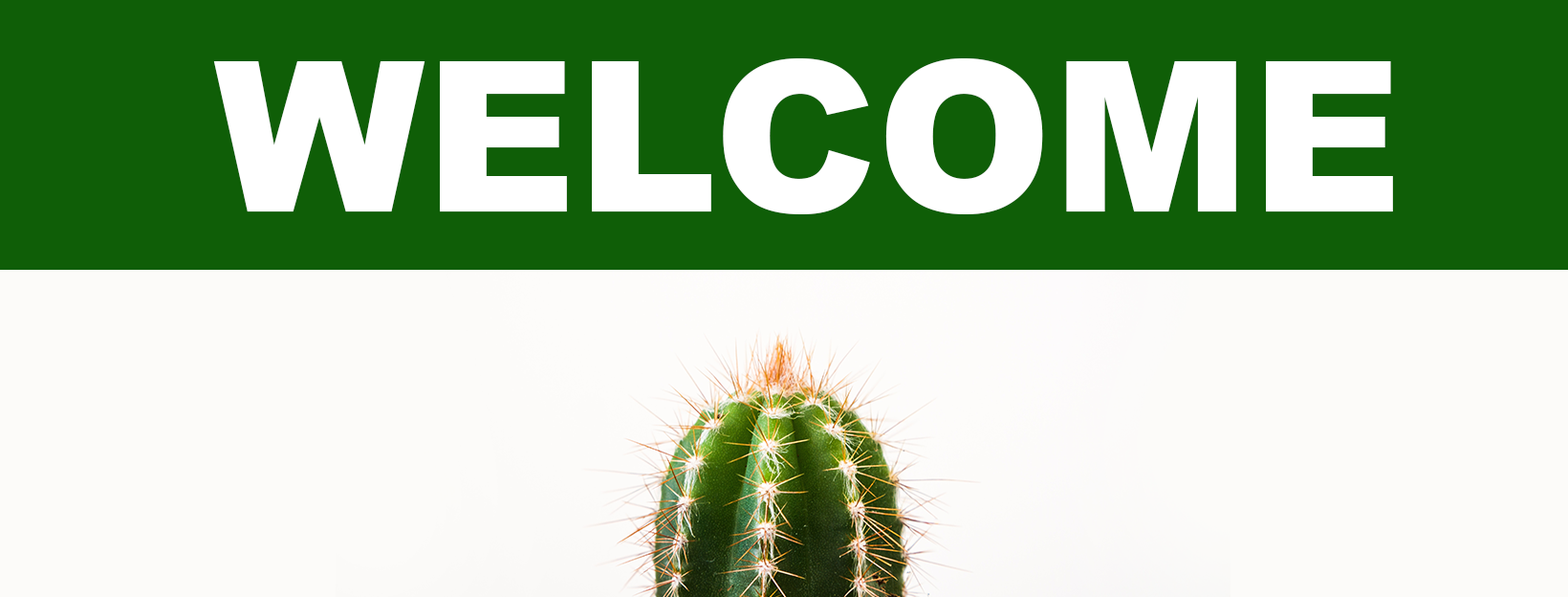
<style>
.page{position:relative;width:1568px;height:597px;background:#fcfbf9}
.page>*{position:absolute;margin:0}
.t1{font:210.3px "Arial-Black";color:#ffffff;text-transform:uppercase}
</style>
<div class="page">
<p class="t1" style="left:213px;top:58px;width:1180px;height:156px">Welcome</p>
</div>
